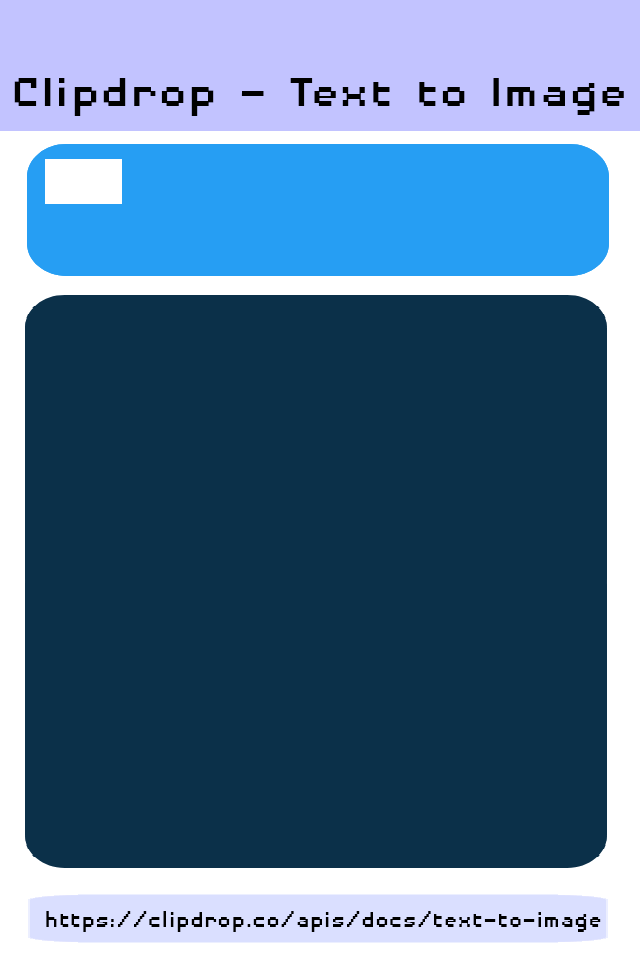
<style>
.page{position:relative;width:640px;height:960px;background:#0b3049}
.page>*{position:absolute;margin:0}
.t1{font:53.2px "DisposableDroidBB";color:#000000;scale:1.14 1}
.t2{font:28.8px "DisposableDroidBB";color:#000000}
</style>
<div class="page">
<p class="t1" style="left:14px;top:78px;width:610px;height:38px">Clipdrop - Text to Image</p>
<p class="t2" style="left:46px;top:911px;width:555px;height:21px">https://clipdrop.co/apis/docs/text-to-image</p>
</div>
